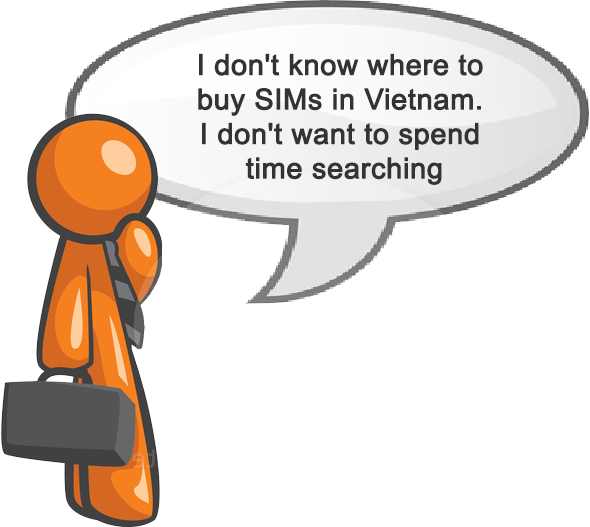
<style>
.page{position:relative;width:590px;height:527px;background:#ffffff}
.page>*{position:absolute;margin:0}
.t1{font:28.7px "ArialMT";color:#333333;font-weight:bold}
</style>
<div class="page">
<p class="t1" style="left:198px;top:53px;width:285px;height:132px;text-align:center">I don't know where to <br>buy SIMs in Vietnam. <br>I don't want to spend <br>time searching</p>
</div>
